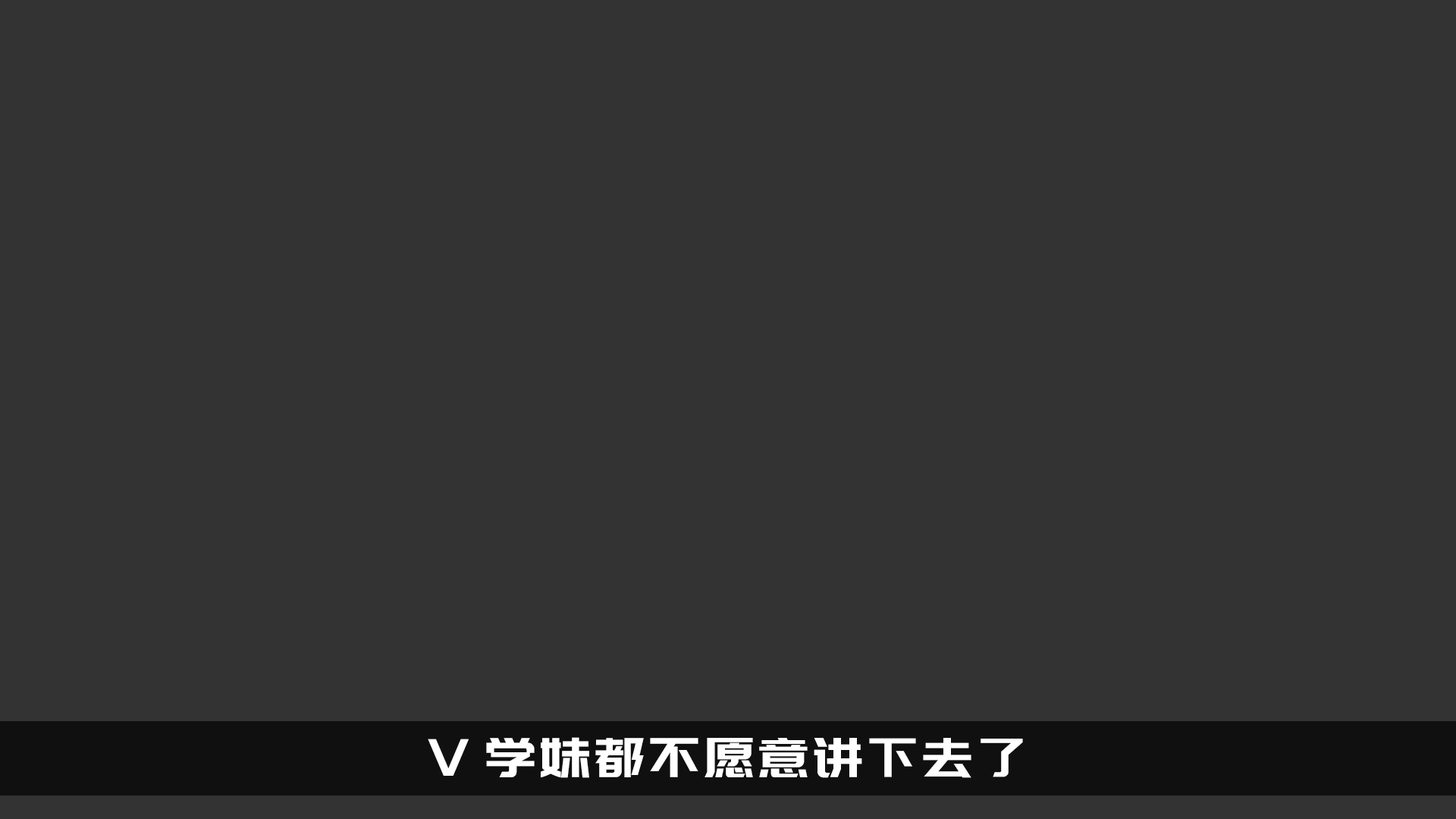
<style>
.page{position:relative;width:1456px;height:819px;background:#333333}
.page>*{position:absolute;margin:0}
.t1{font:54.6px "PangMenZhengDao-3";color:#ffffff}
</style>
<div class="page">
<p class="t1" style="left:428px;top:737px;width:595px;height:41px">V学妹都不愿意讲下去了</p>
</div>
